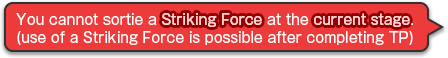
<style>
.page{position:relative;width:448px;height:58px;background:#ed3b3b}
.page>*{position:absolute;margin:0}
.t1{font:14px/18px "GothicMB101Pro-Regular";color:#ffffff}
.t2{font:14px/18px "GothicMB101Pro-Regular";color:#ffd3d3}
</style>
<div class="page">
<p class="t1" style="left:16px;top:13px;width:397px;height:32px;text-align:center">You cannot sortie a <span class="t2">Striking Force</span> at the <span class="t2">current stage</span>.<br>(use of a Striking Force is possible after completing TP)</p>
<p class="t1" style="left:16px;top:13px;width:397px;height:32px;text-align:center">You cannot sortie a <span class="t2">Striking Force</span> at the <span class="t2">current stage</span>.<br>(use of a Striking Force is possible after completing TP)</p>
</div>
